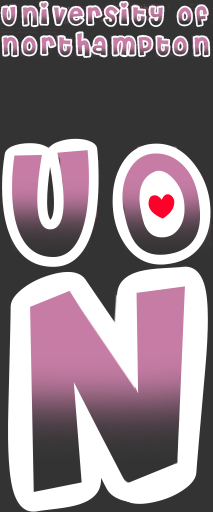
<style>
.page{position:relative;width:213px;height:512px;background:#333333}
.page>*{position:absolute;margin:0}
.t1{font:25px "CheriLiney";letter-spacing:0.14em;color:#ffffff}
.t2{font:150px "CheriLiney";letter-spacing:0.14em;color:#ffffff}
</style>
<div class="page">
<p class="t1" style="left:0px;top:0px;width:211px;height:58px;text-align:center">University of Northampton</p>
<p class="t2" style="left:2px;top:138px;width:209px;height:129px">UO</p>
</div>
